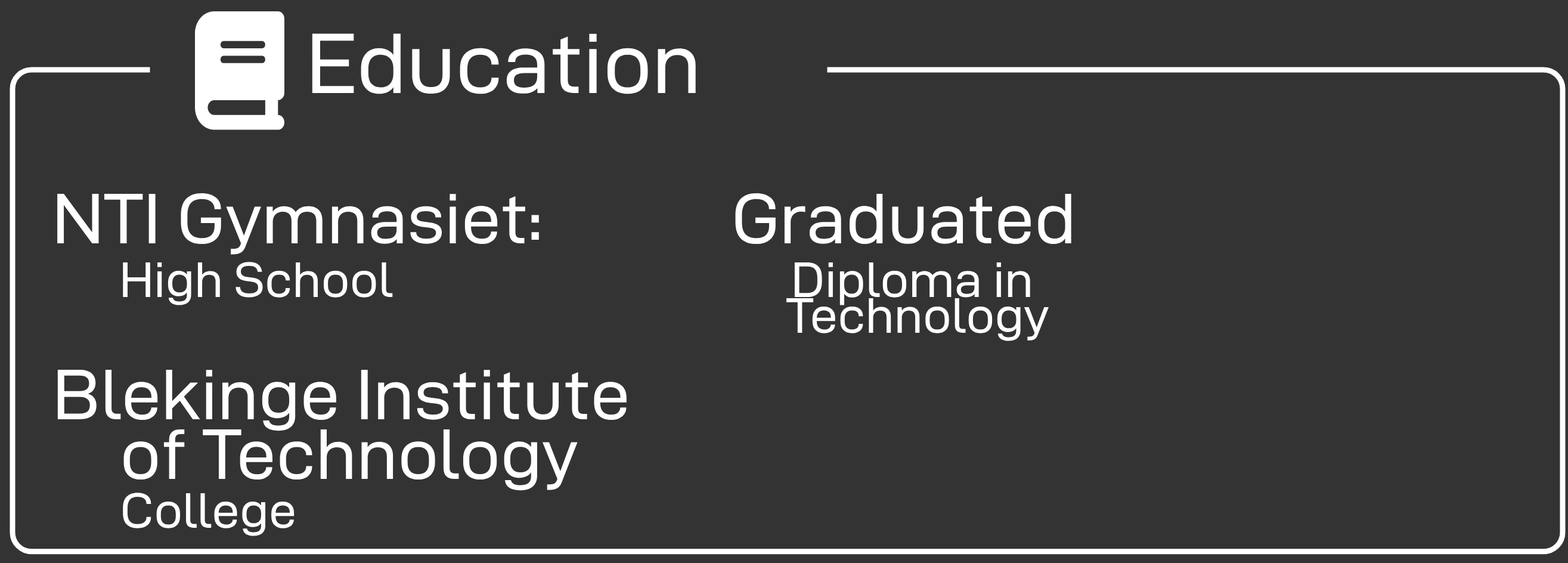
<style>
.page{position:relative;width:1568px;height:563px;background:#333333}
.page>*{position:absolute;margin:0}
.t1{font:85.9px "D-DINExp";color:#ffffff}
.t2{font:71.6px "D-DINExp";color:#ffffff}
.t3{font:50.1px "D-DINExp";color:#ffffff}
.t4{font:50.1px/35.8px "D-DINExp";color:#ffffff}
.t5{font:71.6px/59.6px "D-DINExp";color:#ffffff}
</style>
<div class="page">
<p class="t1" style="left:312px;top:33px;width:384px;height:61px">Education</p>
<p class="t2" style="left:57px;top:193px;width:482px;height:62px">NTI Gymnasiet:</p>
<p class="t2" style="left:735px;top:193px;width:336px;height:51px">Graduated</p>
<p class="t3" style="left:123px;top:262px;width:270px;height:43px">High School</p>
<p class="t4" style="left:786px;top:262px;width:263px;height:79px;text-align:center">Diploma in <br>Technology</p>
<p class="t5" style="left:57px;top:370px;width:570px;height:121px;text-align:center">Blekinge Institute<br> of Technology</p>
<p class="t3" style="left:123px;top:492px;width:172px;height:44px">College</p>
</div>
